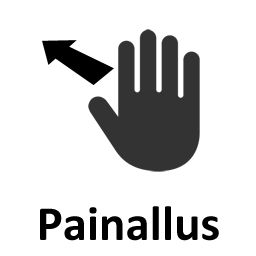
<style>
.page{position:relative;width:256px;height:256px;background:#ffffff}
.page>*{position:absolute;margin:0}
.t1{font:49.2px "Calibri-Bold";color:#000000}
.t2{font:886.2px "Calibri-Bold";color:#000000}
</style>
<div class="page">
<p class="t1" style="left:40px;top:206px;width:179px;height:35px">Painallus <span class="t2">kättä</span></p>
</div>
